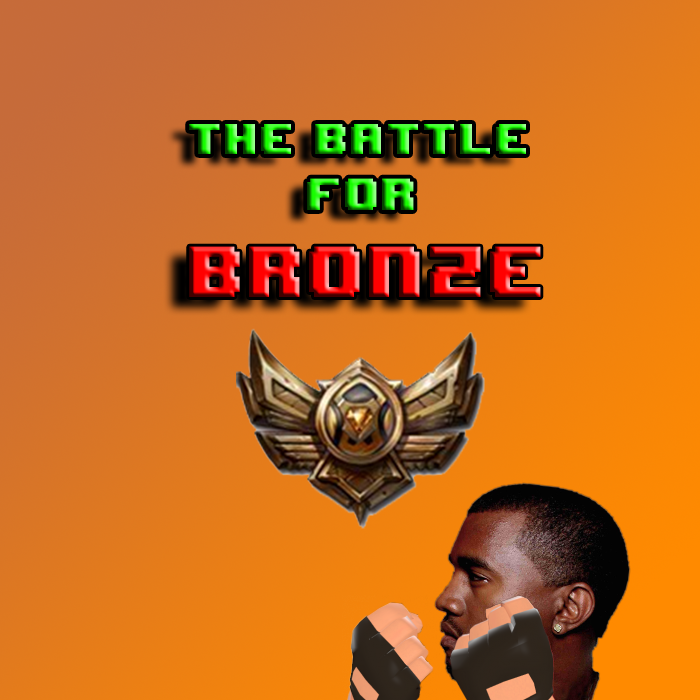
<style>
.page{position:relative;width:700px;height:700px}
.page>*{position:absolute;margin:0}
.t1{font:36px "8BITWONDERNominal"}
.t2{font:37.4px "8BITWONDERNominal"}
.t3{font:60.3px "8BITWONDERNominal"}
</style>
<div class="page">
<p class="t1" style="left:189px;top:124px;width:337px;height:30px">The Battle</p>
<p class="t2" style="left:307px;top:178px;width:107px;height:32px">For</p>
<p class="t3" style="left:189px;top:246px;width:352px;height:51px">Bronze</p>
</div>
